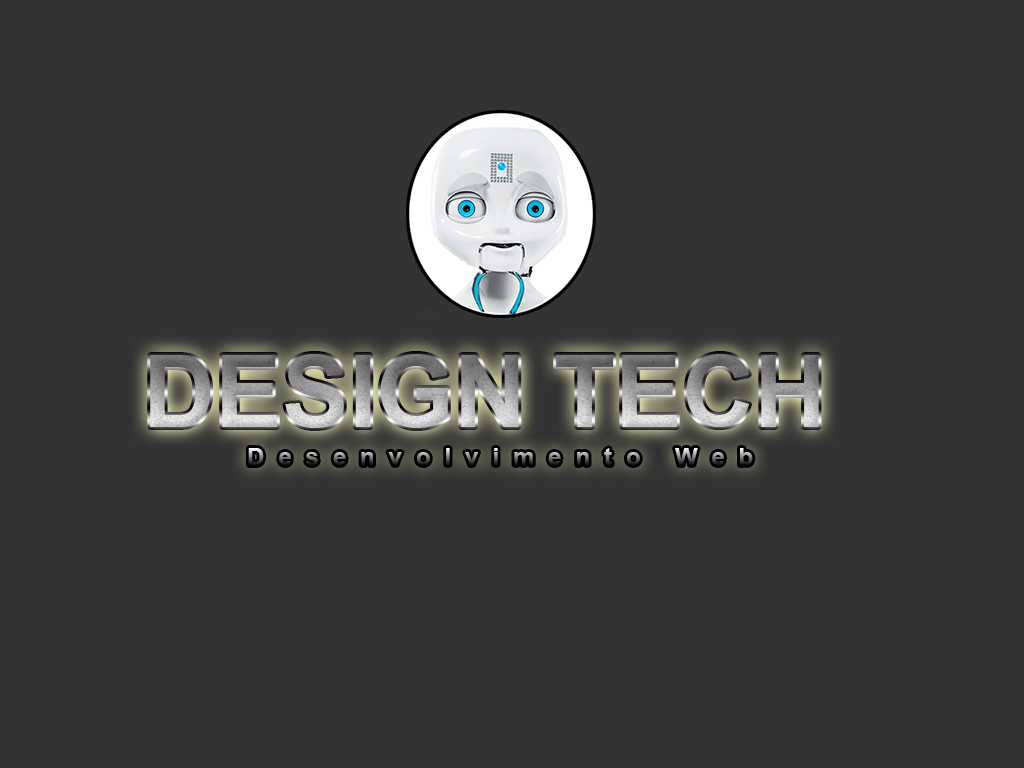
<style>
.page{position:relative;width:1024px;height:768px;background:#333333}
.page>*{position:absolute;margin:0}
.t1{font:100px "Arial-BoldMT"}
.t2{font:24px "Arial-BoldMT";letter-spacing:0.58em}
</style>
<div class="page">
<p class="t1" style="left:150px;top:354px;width:669px;height:74px">DESIGN TECH</p>
<p class="t2" style="left:248px;top:448px;width:505px;height:17px">Desenvolvimento Web</p>
</div>
